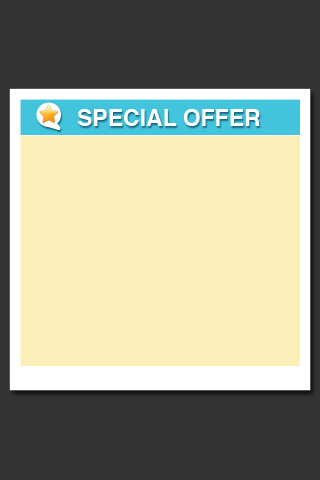
<style>
.page{position:relative;width:320px;height:480px;background:#fceeb9}
.page>*{position:absolute;margin:0}
.t1{font:23px "Helvetica-Bold";color:#ffffff}
</style>
<div class="page">
<p class="t1" style="left:78px;top:109px;width:182px;height:17px">SPECIAL OFFER</p>
</div>
